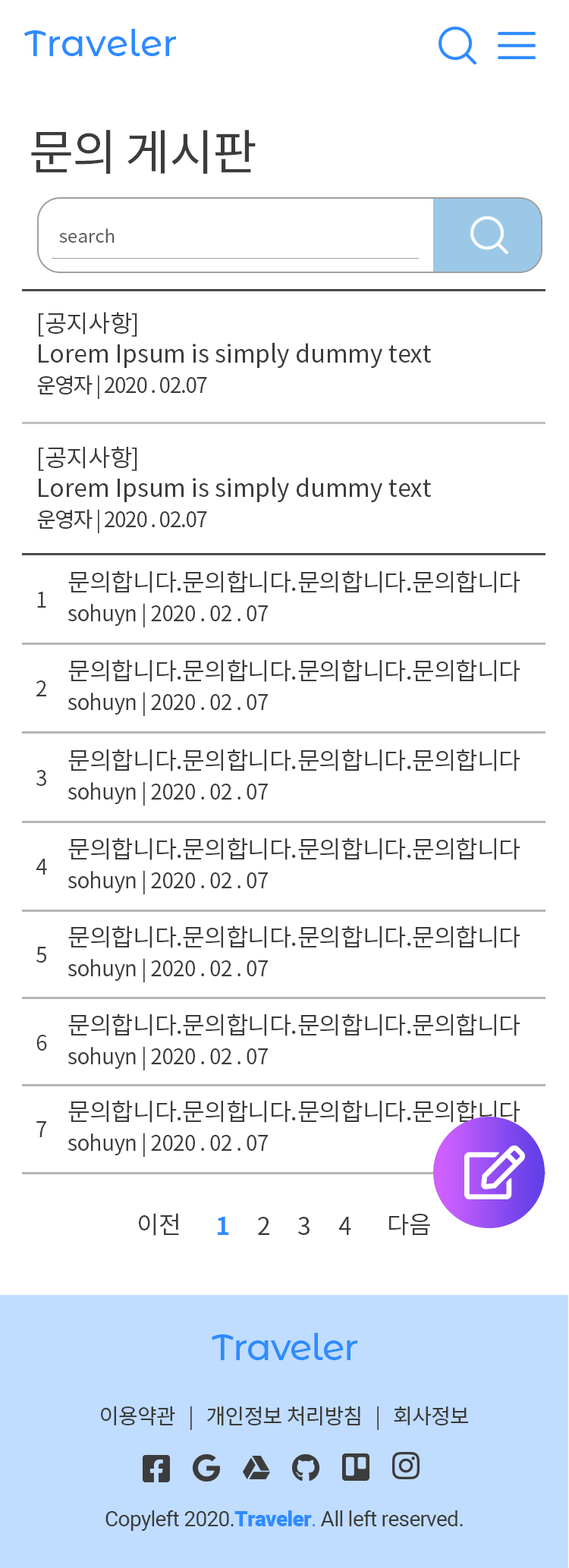
<style>
.page{position:relative;width:569px;height:1568px;background:#ffffff}
.page>*{position:absolute;margin:0}
.t1{font:36.4px "MontserratAlternates-Medium";color:#2e8bff}
.t2{font:48.5px "NotoSansKR-Regular";letter-spacing:-0.025em;color:#3c3c3c}
.t3{font:18.2px "NotoSansKR-Regular";color:#5f5f5f}
.t4{font:24.3px/30.3px "NotoSansKR-Regular";color:#3c3c3c}
.t5{font:24.3px/30.3px "NotoSansKR-Regular";letter-spacing:-0.025em;color:#3c3c3c}
.t6{font:21.2px/30.3px "NotoSansKR-Regular";letter-spacing:-0.05em;color:#3c3c3c}
.t7{font:21.2px/30.3px "NotoSansKR-Regular";letter-spacing:-0.025em;color:#3c3c3c}
.t8{font:21.2px "NotoSansKR-Regular";letter-spacing:-0.025em;color:#3c3c3c}
.t9{font:24.3px "NotoSansKR-Regular";color:#3c3c3c}
.t10{font:24.3px "NotoSansKR-Bold";color:#2e8bff}
.t11{font:36.4px "MontserratAlternates-Medium";letter-spacing:-0.025em;color:#2e8bff}
.t12{font:21.2px "Roboto-Regular";letter-spacing:-0.025em;color:#3c3c3c}
.t13{font:21.2px "Roboto-Black";letter-spacing:-0.025em;color:#2e8bff}
.t14{font:21.2px "Roboto-Regular";letter-spacing:-0.025em;color:#2e8bff}
</style>
<div class="page">
<p class="t1" style="left:24px;top:29px;width:152px;height:27px">Traveler</p>
<p class="t2" style="left:31px;top:130px;width:225px;height:44px">문의 게시판</p>
<p class="t3" style="left:59px;top:228px;width:56px;height:15px">search</p>
<p class="t4" style="left:37px;top:312px;width:395px;height:87px">[<span class="t5">공지사항</span>]   <br>Lorem Ipsum is simply dummy text<br><span class="t6">운영자 | 2020 . 02.07</span></p>
<p class="t4" style="left:37px;top:446px;width:395px;height:87px">[<span class="t5">공지사항</span>]   <br>Lorem Ipsum is simply dummy text<br><span class="t6">운영자 | 2020 . 02.07</span></p>
<p class="t5" style="left:68px;top:570px;width:452px;height:57px">문의합니다.문의합니다.문의합니다.문의합니다<br><span class="t7">sohuyn | 2020 . 02 . 07</span></p>
<p class="t8" style="left:37px;top:592px;width:9px;height:16px">1</p>
<p class="t5" style="left:68px;top:659px;width:452px;height:57px">문의합니다.문의합니다.문의합니다.문의합니다<br><span class="t7">sohuyn | 2020 . 02 . 07</span></p>
<p class="t8" style="left:36px;top:680px;width:10px;height:16px">2</p>
<p class="t5" style="left:68px;top:749px;width:452px;height:57px">문의합니다.문의합니다.문의합니다.문의합니다<br><span class="t7">sohuyn | 2020 . 02 . 07</span></p>
<p class="t8" style="left:36px;top:770px;width:10px;height:16px">3</p>
<p class="t5" style="left:68px;top:837px;width:452px;height:57px">문의합니다.문의합니다.문의합니다.문의합니다<br><span class="t7">sohuyn | 2020 . 02 . 07</span></p>
<p class="t8" style="left:36px;top:859px;width:11px;height:16px">4</p>
<p class="t5" style="left:68px;top:925px;width:452px;height:57px">문의합니다.문의합니다.문의합니다.문의합니다<br><span class="t7">sohuyn | 2020 . 02 . 07</span></p>
<p class="t8" style="left:36px;top:947px;width:10px;height:16px">5</p>
<p class="t5" style="left:68px;top:1013px;width:452px;height:57px">문의합니다.문의합니다.문의합니다.문의합니다<br><span class="t7">sohuyn | 2020 . 02 . 07</span></p>
<p class="t8" style="left:36px;top:1035px;width:11px;height:16px">6</p>
<p class="t5" style="left:68px;top:1100px;width:452px;height:57px">문의합니다.문의합니다.문의합니다.문의합니다<br><span class="t7">sohuyn | 2020 . 02 . 07</span></p>
<p class="t8" style="left:36px;top:1121px;width:10px;height:16px">7</p>
<p class="t9" style="left:139px;top:1213px;width:40px;height:23px">이전</p>
<p class="t9" style="left:218px;top:1217px;width:133px;height:18px"><span class="t10">1     </span>2     3     4</p>
<p class="t9" style="left:389px;top:1214px;width:41px;height:22px">다음</p>
<p class="t11" style="left:211px;top:1333px;width:146px;height:27px">Traveler</p>
<p class="t8" style="left:101px;top:1406px;width:368px;height:24px">이용약관   |   개인정보 처리방침   |   회사정보</p>
<p class="t12" style="left:105px;top:1510px;width:358px;height:21px">Copyleft 2020.<span class="t13">Traveler</span><span class="t14">.</span> All left reserved.</p>
</div>
